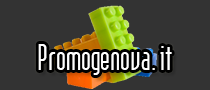
<style>
.page{position:relative;width:210px;height:90px;background:#333333}
.page>*{position:absolute;margin:0}
.t1{font:36px "Institution";color:#ffffff}
</style>
<div class="page">
<p class="t1" style="left:38px;top:44px;width:134px;height:31px">Promogenova.it</p>
</div>
